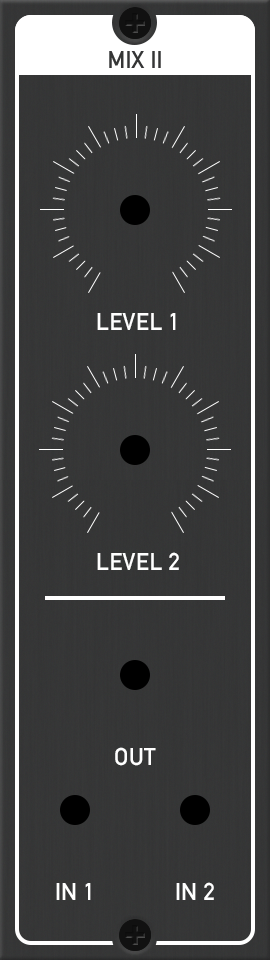
<style>
.page{position:relative;width:270px;height:960px}
.page>*{position:absolute;margin:0}
.t1{font:24px "DINAlternate-Bold";color:#ffffff;font-variant:small-caps}
</style>
<div class="page">
<p class="t1" style="left:97px;top:313px;width:79px;height:17px">LEVEL 1</p>
<p class="t1" style="left:97px;top:552px;width:82px;height:18px">LEVEL 2</p>
<p class="t1" style="left:115px;top:747px;width:41px;height:19px">OUT</p>
<p class="t1" style="left:56px;top:883px;width:35px;height:17px">IN 1</p>
<p class="t1" style="left:176px;top:882px;width:38px;height:18px">IN 2</p>
</div>
